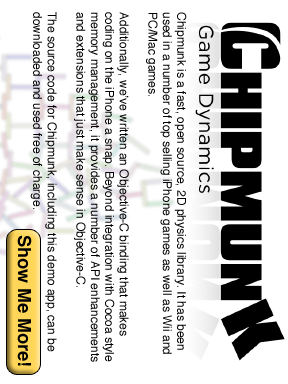
<style>
.page{position:relative;width:288px;height:384px;background:#ffffff}
.page>*{position:absolute;margin:0}
.t1{font:12px "Helvetica";color:#000000}
.t2{font:18px "Helvetica-Bold";color:#000000}
</style>
<div class="page">
<p class="t1" style="left:30px;top:12px;width:157px;height:350px;rotate:90deg">Chipmunk is a fast, open source, 2D physics library. It has been used in a number of top selling iPhone games as well as Wii and PC/Mac games.<br><br>Additionally, we’ve written an Objective-C binding that makes coding on the iPhone a snap. Beyond integration with Cocoa style memory management, it provides a number of API enhancements and extensions that just make sense in Objective-C.<br><br>The source code for Chipmunk, including this demo app, can be downloaded and used free of charge.</p>
<p class="t2" style="left:17px;top:235px;width:15px;height:131px;rotate:90deg">Show Me More!</p>
</div>
